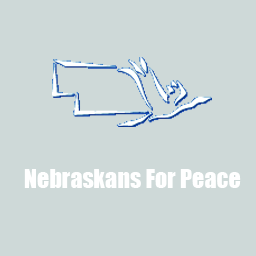
<style>
.page{position:relative;width:256px;height:256px;background:#ced9d8}
.page>*{position:absolute;margin:0}
.t1{font:24px "Impact";color:#ffffff}
</style>
<div class="page">
<p class="t1" style="left:24px;top:169px;width:217px;height:19px">Nebraskans For Peace</p>
</div>
